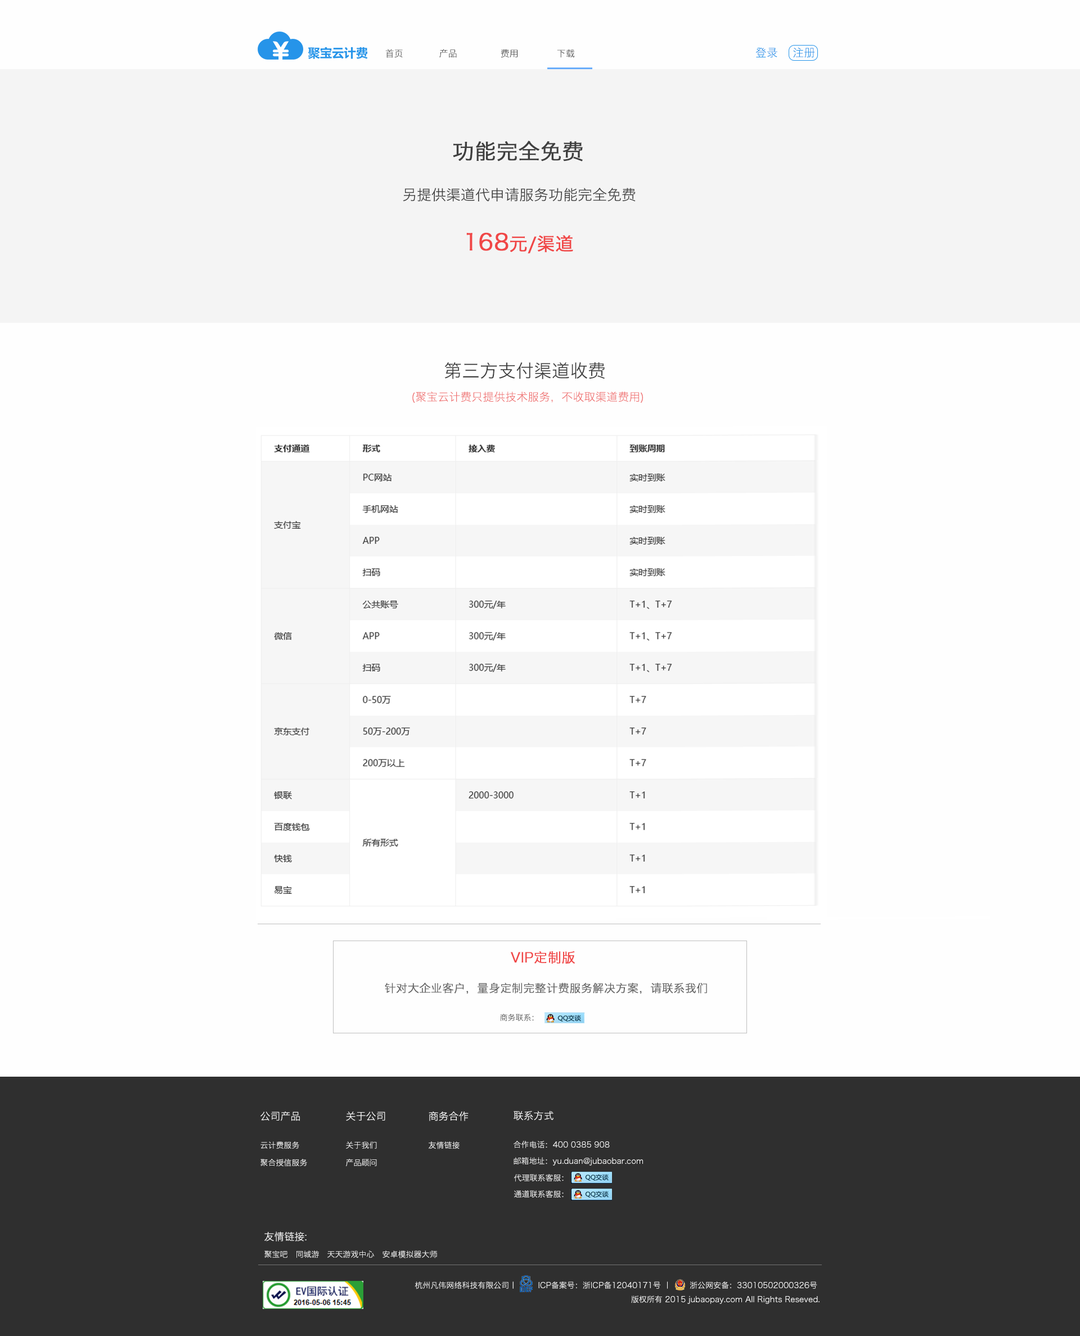
<style>
.page{position:relative;width:1080px;height:1336px;background:#fefefe}
.page>*{position:absolute;margin:0}
.t1{font:9px "HiraginoSansGB-W3";color:#3b3b3b}
.t2{font:9px "HiraginoSansGB-W3"}
.t3{font:11.2px "HiraginoSansGB-W3";color:#2694e9}
.t4{font:21.4px "HiraginoSansGB-W3";color:#3f3f3f;font-weight:bold}
.t5{font:14.6px "HiraginoSansGB-W3";color:#3f3f3f}
.t6{font:18px "HiraginoSansGB-W3";color:#f04747;font-weight:bold}
.t7{font:22.5px "HiraginoSansGB-W3";color:#f04747;font-weight:bold}
.t8{font:18px "HiraginoSansGB-W3";color:#3f3f3f}
.t9{font:11.2px "HiraginoSansGB-W3";color:#ef6e6e}
.t10{font:13.5px "HiraginoSansGB-W3";color:#f04747;font-weight:bold}
.t11{font:11.2px "HiraginoSansGB-W3";color:#666666;font-weight:bold}
.t12{font:7.9px "HiraginoSansGB-W3";color:#313131}
.t13{font:10.1px "HiraginoSansGB-W3";color:#ffffff}
.t14{font:7.9px "HiraginoSansGB-W3";color:#ffffff}
</style>
<div class="page">
<p class="t1" style="left:385px;top:49px;width:18px;height:9px">首页</p>
<p class="t1" style="left:439px;top:49px;width:18px;height:9px">产品</p>
<p class="t1" style="left:501px;top:49px;width:17px;height:9px">费用</p>
<p class="t2" style="left:557px;top:49px;width:18px;height:9px">下载</p>
<p class="t3" style="left:755px;top:47px;width:60px;height:11px">登录    注册</p>
<p class="t4" style="left:453px;top:141px;width:130px;height:20px">功能完全免费</p>
<p class="t5" style="left:403px;top:187px;width:233px;height:14px">另提供渠道代申请服务功能完全免费</p>
<p class="t6" style="left:466px;top:232px;width:107px;height:22px"><span class="t7">168</span>元/渠道</p>
<p class="t8" style="left:444px;top:362px;width:161px;height:17px">第三方支付渠道收费</p>
<p class="t9" style="left:412px;top:392px;width:231px;height:11px">(聚宝云计费只提供技术服务，不收取渠道费用)</p>
<p class="t10" style="left:510px;top:951px;width:65px;height:13px">VIP定制版</p>
<p class="t11" style="left:385px;top:983px;width:322px;height:11px">针对大企业客户，量身定制完整计费服务解决方案，请联系我们</p>
<p class="t12" style="left:500px;top:1014px;width:34px;height:7px">商务联系：</p>
<p class="t13" style="left:260px;top:1111px;width:40px;height:10px">公司产品</p>
<p class="t13" style="left:346px;top:1112px;width:39px;height:9px">关于公司</p>
<p class="t13" style="left:429px;top:1111px;width:40px;height:10px">商务合作</p>
<p class="t13" style="left:514px;top:1111px;width:40px;height:9px">联系方式</p>
<p class="t14" style="left:260px;top:1141px;width:39px;height:8px">云计费服务</p>
<p class="t14" style="left:346px;top:1141px;width:31px;height:8px">关于我们</p>
<p class="t14" style="left:429px;top:1141px;width:31px;height:8px">友情链接</p>
<p class="t14" style="left:514px;top:1141px;width:96px;height:7px">合作电话：400 0385 908</p>
<p class="t14" style="left:514px;top:1157px;width:129px;height:9px">邮箱地址：yu.duan@jubaobar.com</p>
<p class="t14" style="left:260px;top:1159px;width:47px;height:8px">聚合授信服务</p>
<p class="t14" style="left:346px;top:1159px;width:31px;height:8px">产品顾问</p>
<p class="t14" style="left:514px;top:1174px;width:50px;height:8px">代理联系客服：</p>
<p class="t14" style="left:514px;top:1190px;width:50px;height:8px">通道联系客服：</p>
<p class="t13" style="left:264px;top:1231px;width:43px;height:10px">友情链接:</p>
<p class="t14" style="left:264px;top:1250px;width:173px;height:8px">聚宝吧   同城游   天天游戏中心   安卓模拟器大师</p>
<p class="t14" style="left:415px;top:1281px;width:405px;height:23px;text-align:right">杭州凡伟网络科技有限公司丨        ICP备案号：浙ICP备12040171号 丨       浙公网安备：33010502000326号 <br>版权所有 2015 jubaopay.com All Rights Reseved.</p>
</div>
